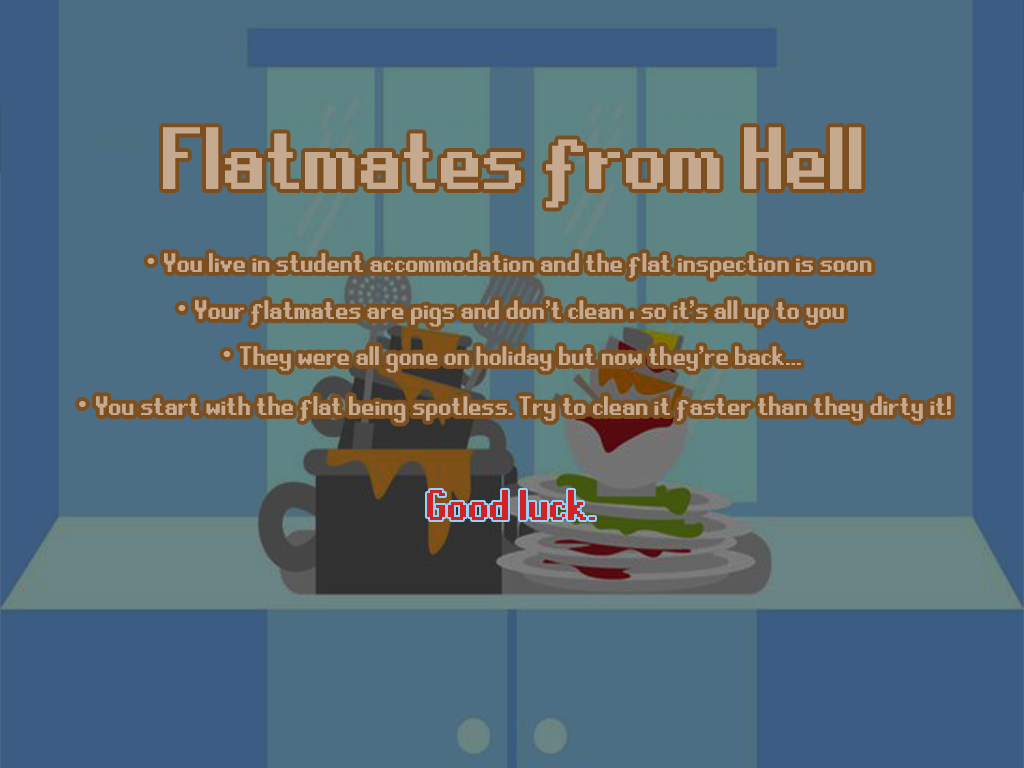
<style>
.page{position:relative;width:1024px;height:768px;background:#4c6e85}
.page>*{position:absolute;margin:0}
.t1{font:98.8px "RuneScape-UF";color:#c5aa8f}
.t2{font:30px "RuneScape-UF";color:#c5aa8f}
.t3{font:30px "Helvetica";color:#c5aa8f}
.t4{font:48px "RuneScape-UF";color:#d22222}
</style>
<div class="page">
<p class="t1" style="left:163px;top:127px;width:699px;height:81px">Flatmates from Hell</p>
<p class="t2" style="left:147px;top:253px;width:725px;height:25px"><span class="t3">• </span>You live in student accommodation and the flat inspection is soon</p>
<p class="t2" style="left:178px;top:300px;width:666px;height:27px"><span class="t3">• </span>Your flatmates are pigs and don't clean , so it's all up to you</p>
<p class="t2" style="left:223px;top:346px;width:578px;height:27px"><span class="t3">• </span>They were all gone on holiday but now they're back...</p>
<p class="t2" style="left:79px;top:396px;width:872px;height:27px"><span class="t3">• </span>You start with the flat being spotless. Try to clean it faster than they dirty it!</p>
<p class="t4" style="left:427px;top:490px;width:168px;height:30px">Good luck.</p>
</div>
